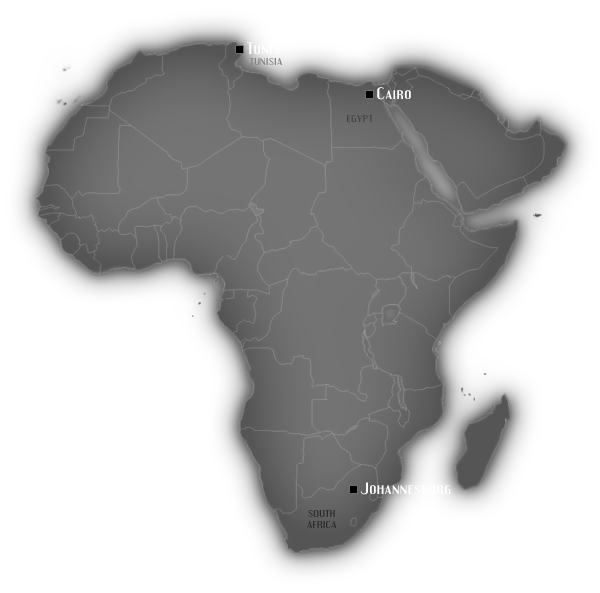
<style>
.page{position:relative;width:600px;height:593px;background:#ffffff}
.page>*{position:absolute;margin:0}
.t1{font:14.4px "Engebrechtre";letter-spacing:0.05em;color:#ffffff;scale:1.25 1}
.t2{font:8.8px "Engebrechtre";letter-spacing:0.05em;color:#848383;scale:1.25 1}
.t3{font:8.8px "Engebrechtre";letter-spacing:0.05em;color:#424242;scale:1.25 1}
.t4{font:8.8px/11px "Engebrechtre";letter-spacing:0.05em;color:#424242;scale:1.25 1}
</style>
<div class="page">
<p class="t1" style="left:246px;top:42px;width:33px;height:12px">Tunis</p>
<p class="t2" style="left:249px;top:58px;width:33px;height:7px">TUNISIA</p>
<p class="t1" style="left:377px;top:87px;width:34px;height:13px">Cairo</p>
<p class="t3" style="left:347px;top:115px;width:26px;height:7px">EGYPT</p>
<p class="t1" style="left:360px;top:482px;width:91px;height:13px">Johannesburg</p>
<p class="t4" style="left:307px;top:510px;width:30px;height:18px;text-align:center">SOUTH<br>AFRICA</p>
</div>
